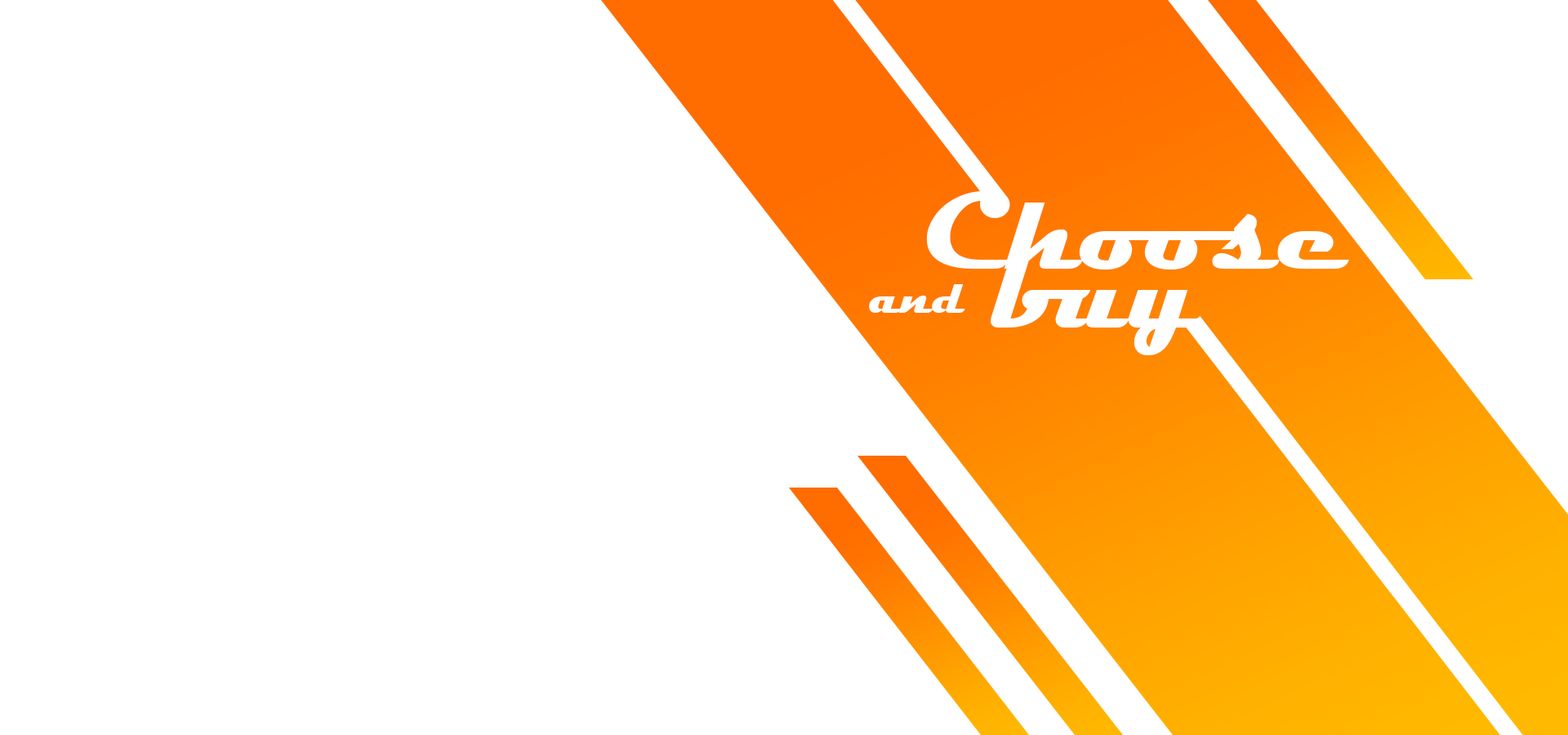
<style>
.page{position:relative;width:1568px;height:735px;background:#ffffff}
.page>*{position:absolute;margin:0}
.t1{font:112.5px "Magneto-Bold";color:#ffffff}
.t2{font:49.2px "Magneto-Bold";color:#ffffff}
</style>
<div class="page">
<p class="t1" style="left:926px;top:191px;width:423px;height:79px">Choose</p>
<p class="t1" style="left:991px;top:261px;width:211px;height:94px">buy</p>
<p class="t2" style="left:869px;top:284px;width:96px;height:29px">and</p>
</div>
